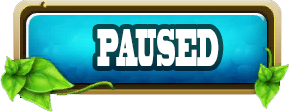
<style>
.page{position:relative;width:289px;height:112px;background:#ffffff}
.page>*{position:absolute;margin:0}
.t1{font:49.4px "BlackoakStd";color:#ffffff;scale:0.24 1}
</style>
<div class="page">
<p class="t1" style="left:97px;top:29px;width:122px;height:37px">PAUSED</p>
</div>
